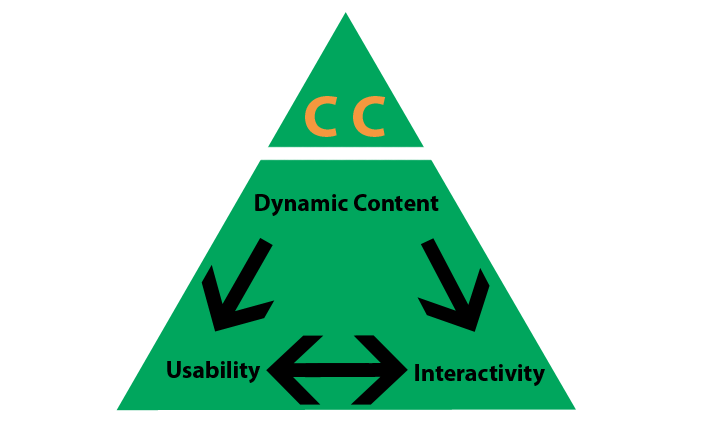
<style>
.page{position:relative;width:720px;height:432px;background:#ffffff}
.page>*{position:absolute;margin:0}
.t1{font:60px "MyriadPro-Bold";color:#f5983e}
.t2{font:24px "MyriadPro-Bold";color:#000000}
</style>
<div class="page">
<p class="t1" style="left:305px;top:96px;width:81px;height:41px">C C</p>
<p class="t2" style="left:255px;top:194px;width:184px;height:22px">Dynamic Content</p>
<p class="t2" style="left:167px;top:361px;width:94px;height:22px">Usability</p>
<p class="t2" style="left:415px;top:364px;width:130px;height:22px">Interactivity</p>
</div>
